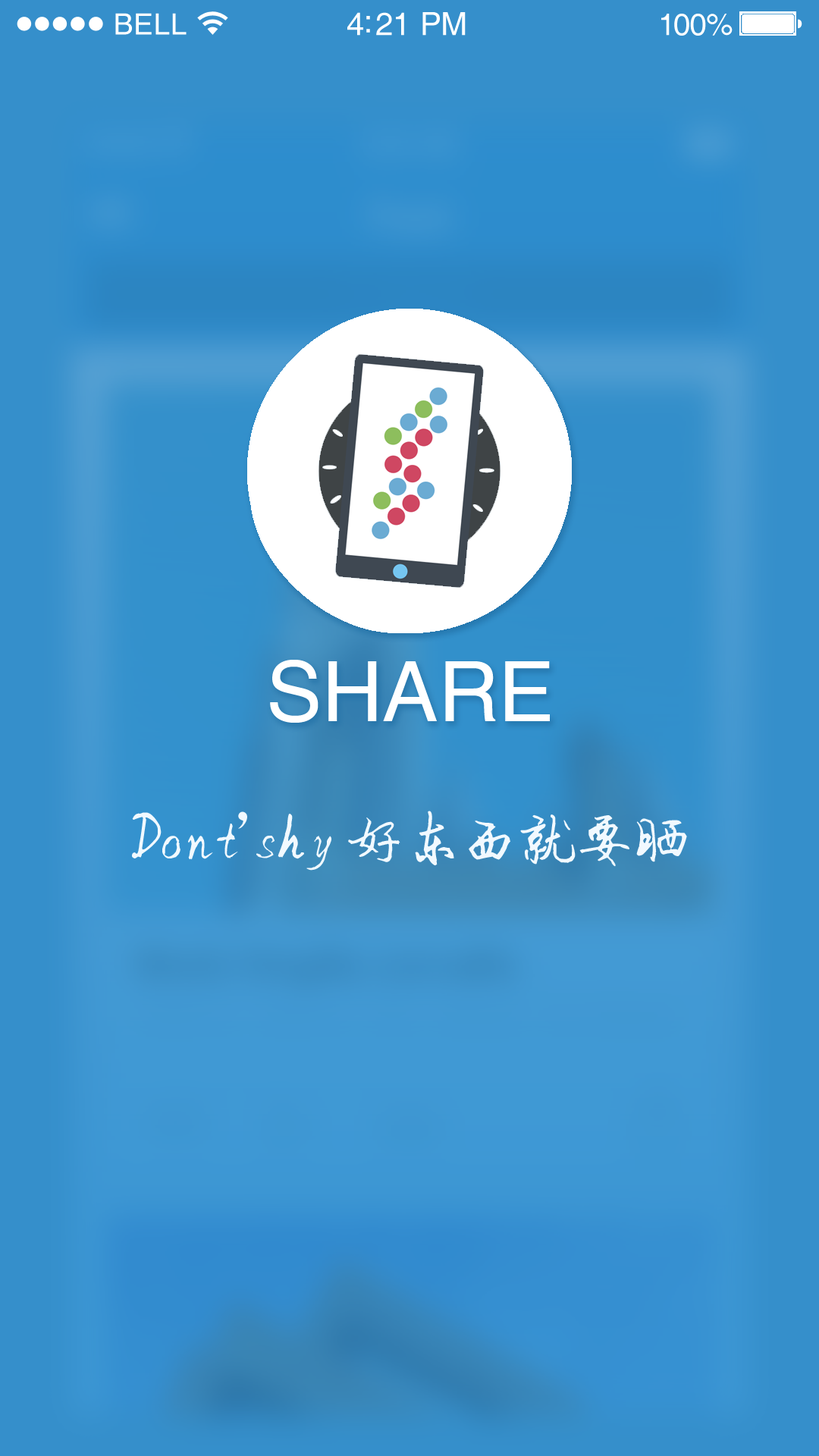
<style>
.page{position:relative;width:819px;height:1456px}
.page>*{position:absolute;margin:0}
.t1{font:29.3px "Helvetica";letter-spacing:0.02em;color:#ffffff}
.t2{font:31.8px "Helvetica";letter-spacing:-0.02em;color:#ffffff}
.t3{font:30.6px "Helvetica";letter-spacing:-0.02em;color:#ffffff}
.t4{font:83.4px "Helvetica";color:#ffffff}
.t5{font:57.6px "CTFangSongSJ";color:#f1f9ff}
</style>
<div class="page">
<p class="t1" style="left:115px;top:13px;width:72px;height:22px">BELL</p>
<p class="t2" style="left:347px;top:12px;width:119px;height:24px">4:21 PM</p>
<p class="t3" style="left:661px;top:14px;width:72px;height:22px">100%</p>
<p class="t4" style="left:270px;top:660px;width:280px;height:63px">SHARE</p>
<p class="t5" style="left:132px;top:811px;width:115px;height:49px">Don’</p>
<p class="t5" style="left:217px;top:814px;width:114px;height:57px">t shy</p>
<p class="t5" style="left:348px;top:811px;width:339px;height:56px">好东西就要晒</p>
</div>
